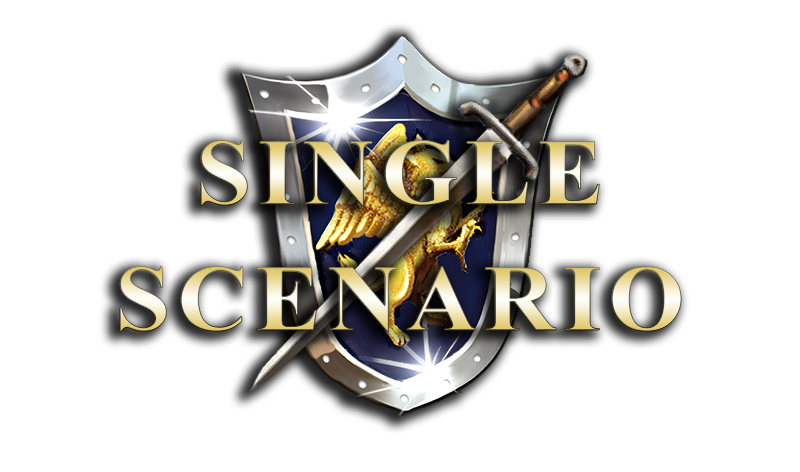
<style>
.page{position:relative;width:800px;height:472px;background:#ffffff}
.page>*{position:absolute;margin:0}
.t1{font:94px "TimesNewRomanPS-BoldMT";letter-spacing:0.07em;scale:1.05 1}
</style>
<div class="page">
<p class="t1" style="left:200px;top:140px;width:400px;height:66px">SINGLE</p>
<p class="t1" style="left:119px;top:266px;width:562px;height:66px">SCENARIO</p>
</div>
